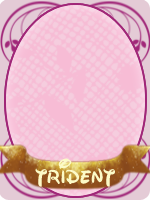
<style>
.page{position:relative;width:150px;height:200px}
.page>*{position:absolute;margin:0}
.t1{font:37.4px "Waltograph";color:#fcfac7}
</style>
<div class="page">
<p class="t1" style="left:35px;top:158px;width:80px;height:29px">trident</p>
</div>
